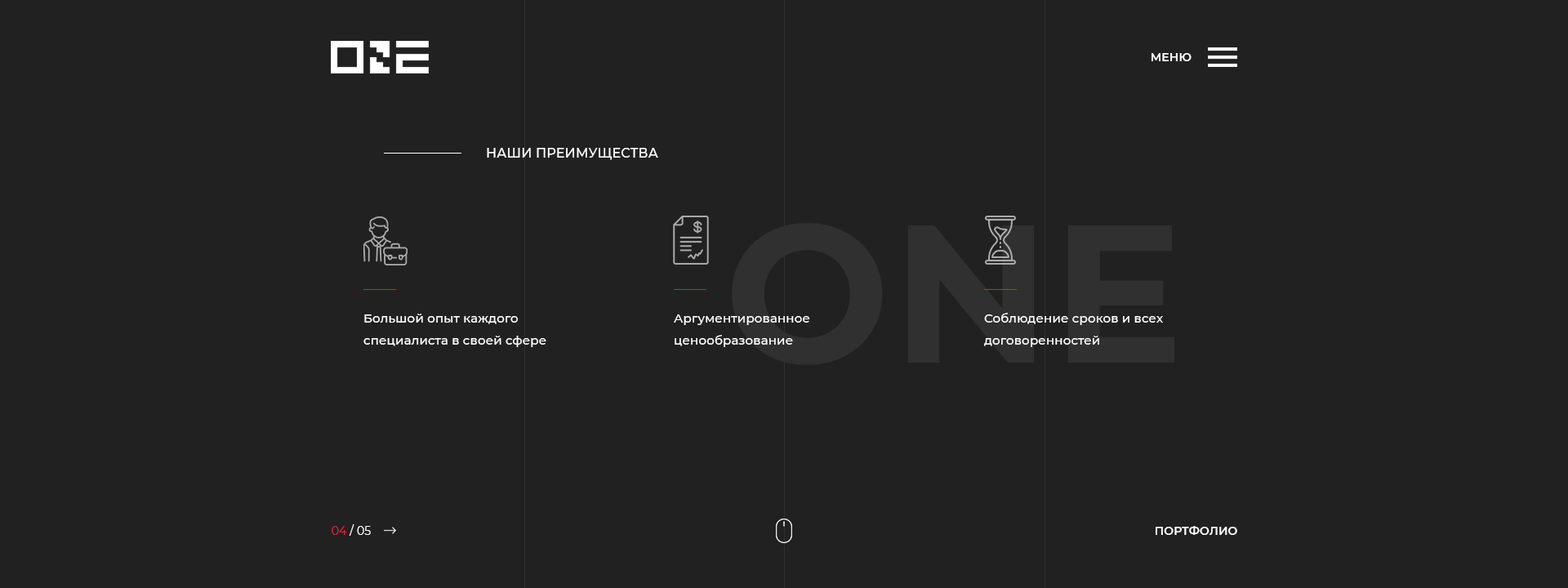
<style>
.page{position:relative;width:1568px;height:588px;background:#212121}
.page>*{position:absolute;margin:0}
.t1{font:11.4px "Montserrat-SemiBold";letter-spacing:0.01em;color:#ffffff}
.t2{font:13.1px "Montserrat-Medium";letter-spacing:0.01em;color:#ffffff}
.t3{font:12.2px/22.1px "Montserrat-Medium";letter-spacing:0.01em;color:#ffffff}
.t4{font:11.4px "Montserrat-Regular";letter-spacing:0.01em;color:#ffffff}
.t5{font:11.4px "Montserrat-Regular";letter-spacing:0.01em;color:#e91b38}
</style>
<div class="page">
<p class="t1" style="left:1152px;top:53px;width:40px;height:8px">МЕНЮ</p>
<p class="t2" style="left:487px;top:148px;width:171px;height:12px">НАШИ ПРЕИМУЩЕСТВА</p>
<p class="t3" style="left:363px;top:314px;width:183px;height:33px">Большой опыт каждого специалиста в своей сфере</p>
<p class="t3" style="left:674px;top:314px;width:136px;height:33px">Аргументированное ценообразование</p>
<p class="t3" style="left:984px;top:313px;width:179px;height:34px">Соблюдение сроков и всех договоренностей</p>
<p class="t4" style="left:332px;top:524px;width:39px;height:12px"><span class="t5">04</span> / 05</p>
<p class="t1" style="left:1156px;top:526px;width:81px;height:9px">ПОРТФОЛИО</p>
</div>
